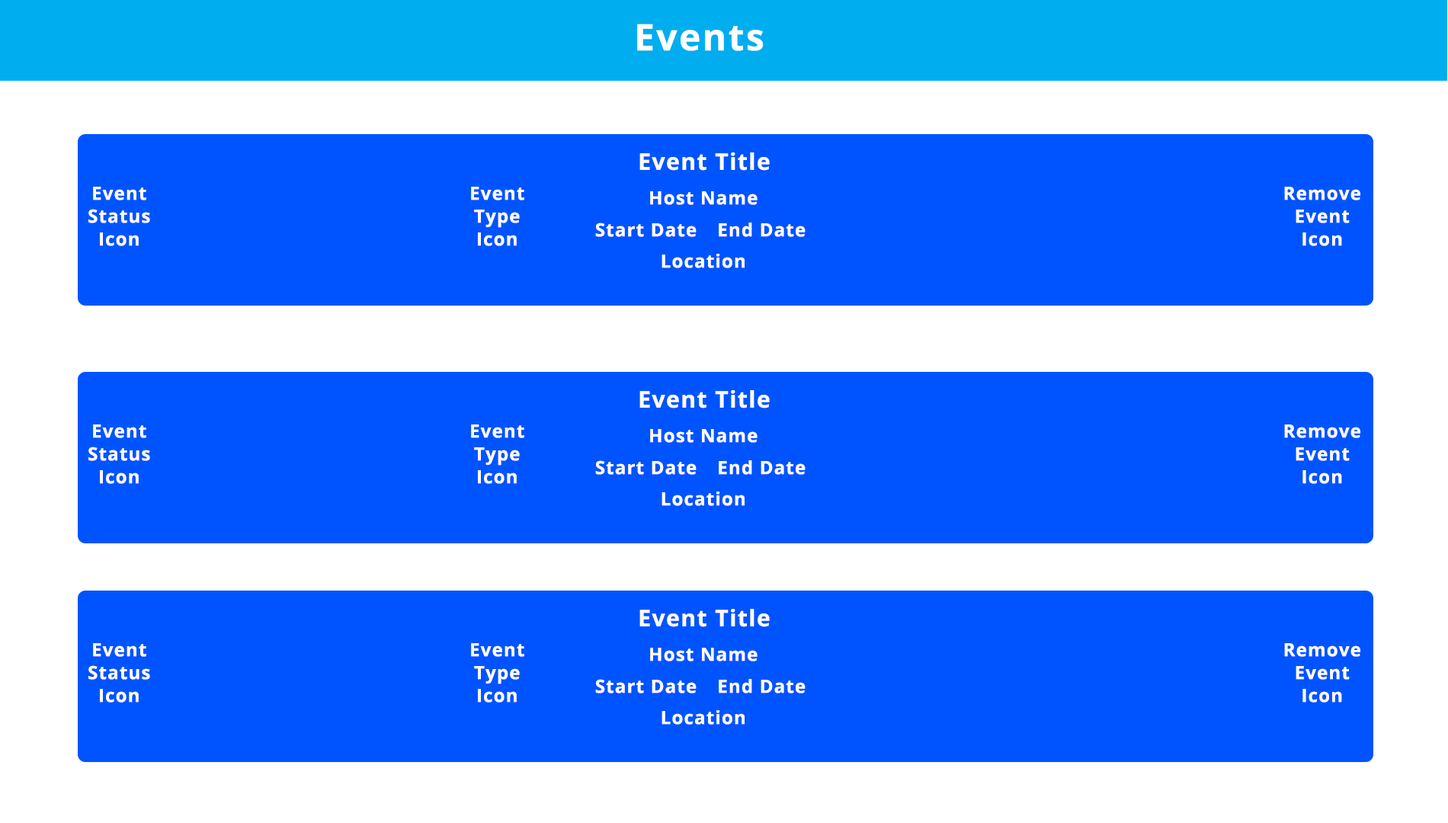
<style>
.page{position:relative;width:1448px;height:823px;background:#0054ff}
.page>*{position:absolute;margin:0}
.t1{font:36.6px "OpenSans-Bold";letter-spacing:0.05em;color:#ffffff}
.t2{font:22.9px "OpenSans-Bold";letter-spacing:0.05em;color:#ffffff}
.t3{font:18.3px/22.9px "OpenSans-Bold";letter-spacing:0.05em;color:#ffffff}
.t4{font:18.3px "OpenSans-Bold";letter-spacing:0.05em;color:#ffffff}
</style>
<div class="page">
<p class="t1" style="left:637px;top:24px;width:126px;height:27px">Events</p>
<p class="t2" style="left:640px;top:152px;width:130px;height:19px">Event Title</p>
<p class="t3" style="left:88px;top:187px;width:62px;height:59px;text-align:center">Event Status Icon</p>
<p class="t3" style="left:471px;top:187px;width:53px;height:59px;text-align:center">Event<br>Type<br>Icon</p>
<p class="t4" style="left:650px;top:191px;width:108px;height:14px">Host Name</p>
<p class="t3" style="left:1284px;top:187px;width:77px;height:59px;text-align:center">Remove Event Icon</p>
<p class="t4" style="left:595px;top:223px;width:102px;height:14px">Start Date</p>
<p class="t4" style="left:719px;top:223px;width:87px;height:14px">End Date</p>
<p class="t4" style="left:662px;top:254px;width:83px;height:14px">Location</p>
<p class="t2" style="left:640px;top:390px;width:130px;height:19px">Event Title</p>
<p class="t3" style="left:88px;top:425px;width:62px;height:59px;text-align:center">Event Status Icon</p>
<p class="t3" style="left:471px;top:425px;width:53px;height:59px;text-align:center">Event<br>Type<br>Icon</p>
<p class="t3" style="left:1284px;top:425px;width:77px;height:59px;text-align:center">Remove Event Icon</p>
<p class="t4" style="left:650px;top:429px;width:108px;height:14px">Host Name</p>
<p class="t4" style="left:595px;top:460px;width:102px;height:15px">Start Date</p>
<p class="t4" style="left:719px;top:460px;width:87px;height:15px">End Date</p>
<p class="t4" style="left:662px;top:492px;width:83px;height:14px">Location</p>
<p class="t2" style="left:640px;top:609px;width:130px;height:18px">Event Title</p>
<p class="t3" style="left:88px;top:643px;width:62px;height:60px;text-align:center">Event Status Icon</p>
<p class="t3" style="left:471px;top:643px;width:53px;height:60px;text-align:center">Event<br>Type<br>Icon</p>
<p class="t4" style="left:650px;top:648px;width:108px;height:14px">Host Name</p>
<p class="t3" style="left:1284px;top:643px;width:77px;height:60px;text-align:center">Remove Event Icon</p>
<p class="t4" style="left:595px;top:679px;width:102px;height:15px">Start Date</p>
<p class="t4" style="left:719px;top:679px;width:87px;height:15px">End Date</p>
<p class="t4" style="left:662px;top:710px;width:83px;height:15px">Location</p>
</div>
